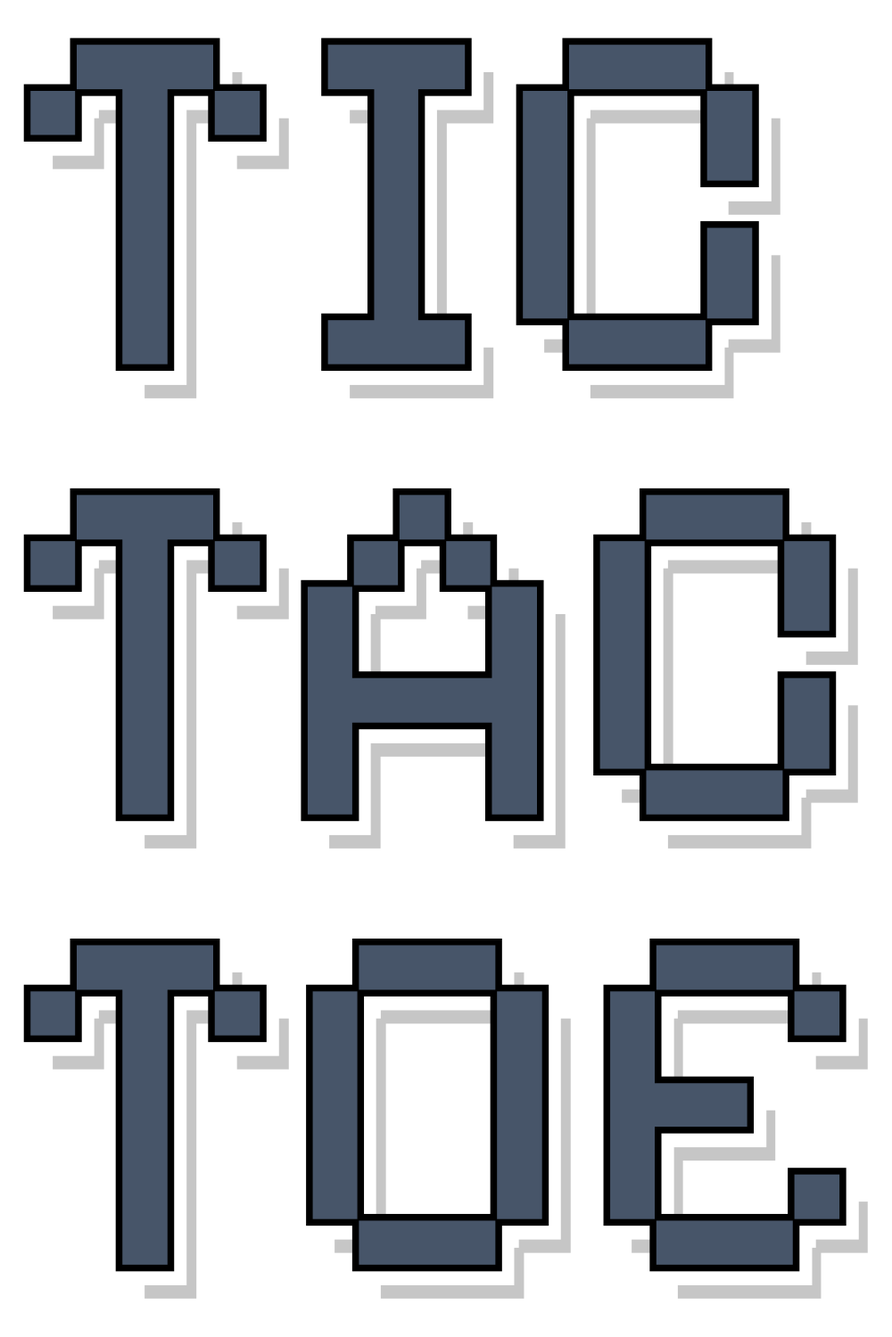
<style>
.page{position:relative;width:892px;height:1337px;background:#ffffff}
.page>*{position:absolute;margin:0}
.t1{font:507.3px/450.4px "PixelifySans-Regular"}
</style>
<div class="page">
<p class="t1" style="left:43px;top:58px;width:816px;height:1228px">TIC<br>TAC<br>TOE</p>
</div>
